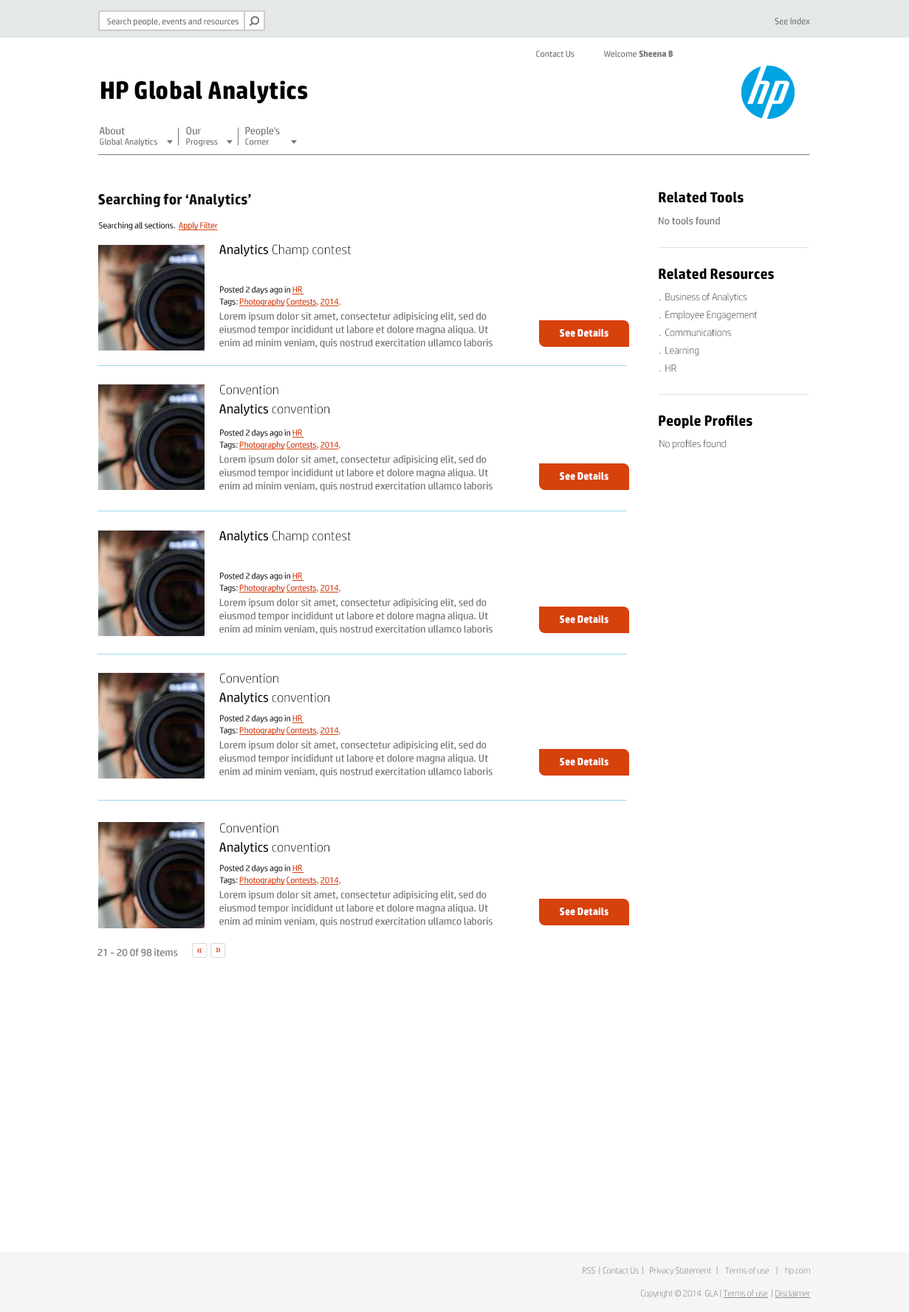
<style>
.page{position:relative;width:909px;height:1312px;background:#ffffff}
.page>*{position:absolute;margin:0}
.t1{font:8.9px "HPSimplified-Regular";color:#767676}
.t2{font:9.2px "HPSimplified-Regular";color:#767676}
.t3{font:8.9px "HPSimplified-Bold";color:#767676}
.t4{font:25.1px "HPSimplified-Bold";color:#000000}
.t5{font:10.3px "HPSimplified-Regular";color:#767676}
.t6{font:14.8px "HPSimplified-Bold";color:#101010}
.t7{font:14.8px "HPSimplified-Bold";color:#000000}
.t8{font:8.9px "HPSimplified-Regular";letter-spacing:-0.02em;color:#272727}
.t9{font:8.9px "HPSimplified-Regular";letter-spacing:-0.02em;color:#d7410b;text-decoration:underline}
.t10{font:13.3px "HPSimplified-Light";color:#101010}
.t11{font:13.3px "HPSimplified-Regular";color:#101010}
.t12{font:8.9px/8.9px "HPSimplified-Regular";letter-spacing:-0.02em;color:#272727}
.t13{font:8.9px/8.9px "HPSimplified-Regular";letter-spacing:-0.02em;color:#d7410b;text-decoration:underline}
.t14{font:8.9px/8.9px "HPSimplified-Regular";letter-spacing:-0.02em;color:#d7410b}
.t15{font:10.3px/14.8px "HPSimplified-Light";letter-spacing:-0.02em;color:#4f4f4f}
.t16{font:10.3px/13.3px "HPSimplified-Regular";color:#767676}
.t17{font:10.3px "HPSimplified-Bold";color:#ffffff}
.t18{font:13.3px/16.2px "HPSimplified-Light";color:#101010}
.t19{font:13.3px/16.2px "HPSimplified-Regular";color:#101010}
.t20{font:10.3px "HPSimplified-Light";letter-spacing:-0.02em;color:#4f4f4f}
.t21{font:11.8px "HPSimplified-Regular";letter-spacing:-0.02em;color:#d7410b}
.t22{font:8.9px "HPSimplified-Light";letter-spacing:-0.02em;color:#87898b}
.t23{font:8.9px "HPSimplified-Light";letter-spacing:-0.02em;color:#87898b;text-decoration:underline}
</style>
<div class="page">
<p class="t1" style="left:107px;top:18px;width:131px;height:8px">Search people, events and resources</p>
<p class="t2" style="left:774px;top:18px;width:36px;height:7px">See Index</p>
<p class="t1" style="left:536px;top:50px;width:38px;height:8px">Contact Us</p>
<p class="t3" style="left:604px;top:50px;width:68px;height:8px"><span class="t1">Welcome </span>Sheena B</p>
<p class="t4" style="left:101px;top:80px;width:207px;height:23px">HP Global Analytics</p>
<p class="t1" style="left:100px;top:127px;width:57px;height:20px"><span class="t5">About<br></span>Global Analytics</p>
<p class="t1" style="left:186px;top:127px;width:32px;height:20px"><span class="t5">Our<br></span>Progress</p>
<p class="t5" style="left:245px;top:127px;width:35px;height:18px">People's <br><span class="t1">Corner</span></p>
<p class="t6" style="left:98px;top:193px;width:153px;height:14px">Searching for ‘Analytics’</p>
<p class="t7" style="left:658px;top:192px;width:85px;height:11px">Related Tools</p>
<p class="t5" style="left:658px;top:216px;width:62px;height:9px">No tools found</p>
<p class="t8" style="left:99px;top:222px;width:119px;height:8px">Searching all sections.  <span class="t9">Apply Filter</span></p>
<p class="t10" style="left:219px;top:244px;width:132px;height:13px"><span class="t11">Analytics </span>Champ contest</p>
<p class="t7" style="left:658px;top:268px;width:116px;height:12px">Related Resources</p>
<p class="t12" style="left:219px;top:286px;width:121px;height:20px">Posted 2 days ago in <span class="t13">HR <br></span>Tags: <span class="t13">Photography Contests</span><span class="t14">, </span><span class="t13">2014</span><span class="t14">,</span></p>
<p class="t15" style="left:659px;top:292px;width:98px;height:80px">.  Business of Analytics<br>.  Employee Engagement<br>.  Communications<br>.  Learning<br>.  HR</p>
<p class="t16" style="left:219px;top:312px;width:273px;height:36px">Lorem ipsum dolor sit amet, consectetur adipisicing elit, sed do eiusmod tempor incididunt ut labore et dolore magna aliqua. Ut enim ad minim veniam, quis nostrud exercitation ullamco laboris</p>
<p class="t17" style="left:559px;top:329px;width:49px;height:8px">See Details</p>
<p class="t18" style="left:219px;top:385px;width:110px;height:31px">Convention<br><span class="t19">Analytics </span>convention</p>
<p class="t7" style="left:658px;top:415px;width:94px;height:14px">People Profiles</p>
<p class="t12" style="left:219px;top:430px;width:121px;height:20px">Posted 2 days ago in <span class="t13">HR <br></span>Tags: <span class="t13">Photography Contests</span><span class="t14">, </span><span class="t13">2014</span><span class="t14">,</span></p>
<p class="t20" style="left:659px;top:439px;width:67px;height:11px">No profiles found</p>
<p class="t16" style="left:219px;top:455px;width:273px;height:37px">Lorem ipsum dolor sit amet, consectetur adipisicing elit, sed do eiusmod tempor incididunt ut labore et dolore magna aliqua. Ut enim ad minim veniam, quis nostrud exercitation ullamco laboris</p>
<p class="t17" style="left:559px;top:472px;width:49px;height:9px">See Details</p>
<p class="t10" style="left:219px;top:531px;width:132px;height:12px"><span class="t11">Analytics </span>Champ contest</p>
<p class="t12" style="left:219px;top:573px;width:121px;height:20px">Posted 2 days ago in <span class="t13">HR <br></span>Tags: <span class="t13">Photography Contests</span><span class="t14">, </span><span class="t13">2014</span><span class="t14">,</span></p>
<p class="t16" style="left:219px;top:599px;width:273px;height:36px">Lorem ipsum dolor sit amet, consectetur adipisicing elit, sed do eiusmod tempor incididunt ut labore et dolore magna aliqua. Ut enim ad minim veniam, quis nostrud exercitation ullamco laboris</p>
<p class="t17" style="left:559px;top:616px;width:49px;height:8px">See Details</p>
<p class="t18" style="left:219px;top:673px;width:110px;height:32px">Convention<br><span class="t19">Analytics </span>convention</p>
<p class="t12" style="left:219px;top:715px;width:121px;height:20px">Posted 2 days ago in <span class="t13">HR <br></span>Tags: <span class="t13">Photography Contests</span><span class="t14">, </span><span class="t13">2014</span><span class="t14">,</span></p>
<p class="t16" style="left:219px;top:741px;width:273px;height:36px">Lorem ipsum dolor sit amet, consectetur adipisicing elit, sed do eiusmod tempor incididunt ut labore et dolore magna aliqua. Ut enim ad minim veniam, quis nostrud exercitation ullamco laboris</p>
<p class="t17" style="left:559px;top:758px;width:49px;height:8px">See Details</p>
<p class="t18" style="left:219px;top:823px;width:110px;height:32px">Convention<br><span class="t19">Analytics </span>convention</p>
<p class="t12" style="left:219px;top:865px;width:121px;height:20px">Posted 2 days ago in <span class="t13">HR <br></span>Tags: <span class="t13">Photography Contests</span><span class="t14">, </span><span class="t13">2014</span><span class="t14">,</span></p>
<p class="t16" style="left:219px;top:891px;width:273px;height:36px">Lorem ipsum dolor sit amet, consectetur adipisicing elit, sed do eiusmod tempor incididunt ut labore et dolore magna aliqua. Ut enim ad minim veniam, quis nostrud exercitation ullamco laboris</p>
<p class="t17" style="left:559px;top:908px;width:49px;height:8px">See Details</p>
<p class="t5" style="left:97px;top:948px;width:81px;height:9px">21 - 20 0f 98 items</p>
<p class="t21" style="left:197px;top:948px;width:5px;height:6px;rotate:180deg">»</p>
<p class="t21" style="left:216px;top:948px;width:5px;height:5px">»</p>
<p class="t22" style="left:582px;top:1267px;width:228px;height:8px">RSS  | Contact Us  |   Privacy Statement   |    Terms of use    |    hp.com</p>
<p class="t22" style="left:641px;top:1289px;width:169px;height:9px">Copyright © 2014  GLA | <span class="t23">Terms of use</span>  | <span class="t23">Disclaimer</span></p>
</div>
